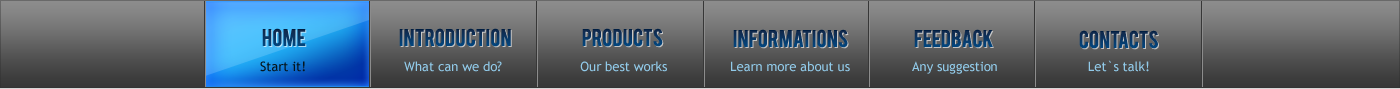
<style>
.page{position:relative;width:1400px;height:89px}
.page>*{position:absolute;margin:0}
.t1{font:19px "Bebas"}
.t2{font:19px "Bebas";color:#093663}
.t3{font:13px "TrebuchetMS";color:#91cae9}
.t4{font:13px "TrebuchetMS";color:#05151d}
</style>
<div class="page">
<p class="t1" style="left:262px;top:28px;width:44px;height:19px">HOME</p>
<p class="t1" style="left:399px;top:28px;width:112px;height:19px">INTRODUCTION</p>
<p class="t1" style="left:582px;top:28px;width:81px;height:19px">PRODUCTs</p>
<p class="t2" style="left:733px;top:29px;width:115px;height:19px">informations</p>
<p class="t1" style="left:914px;top:29px;width:79px;height:19px">feedback</p>
<p class="t1" style="left:1079px;top:30px;width:79px;height:19px">CONTACTS</p>
<p class="t3" style="left:260px;top:60px;width:889px;height:14px"><span class="t4">Start it!                         </span>What can we do?                    Our best works                Learn more about us                Any suggestion                       Let`s talk!</p>
</div>
